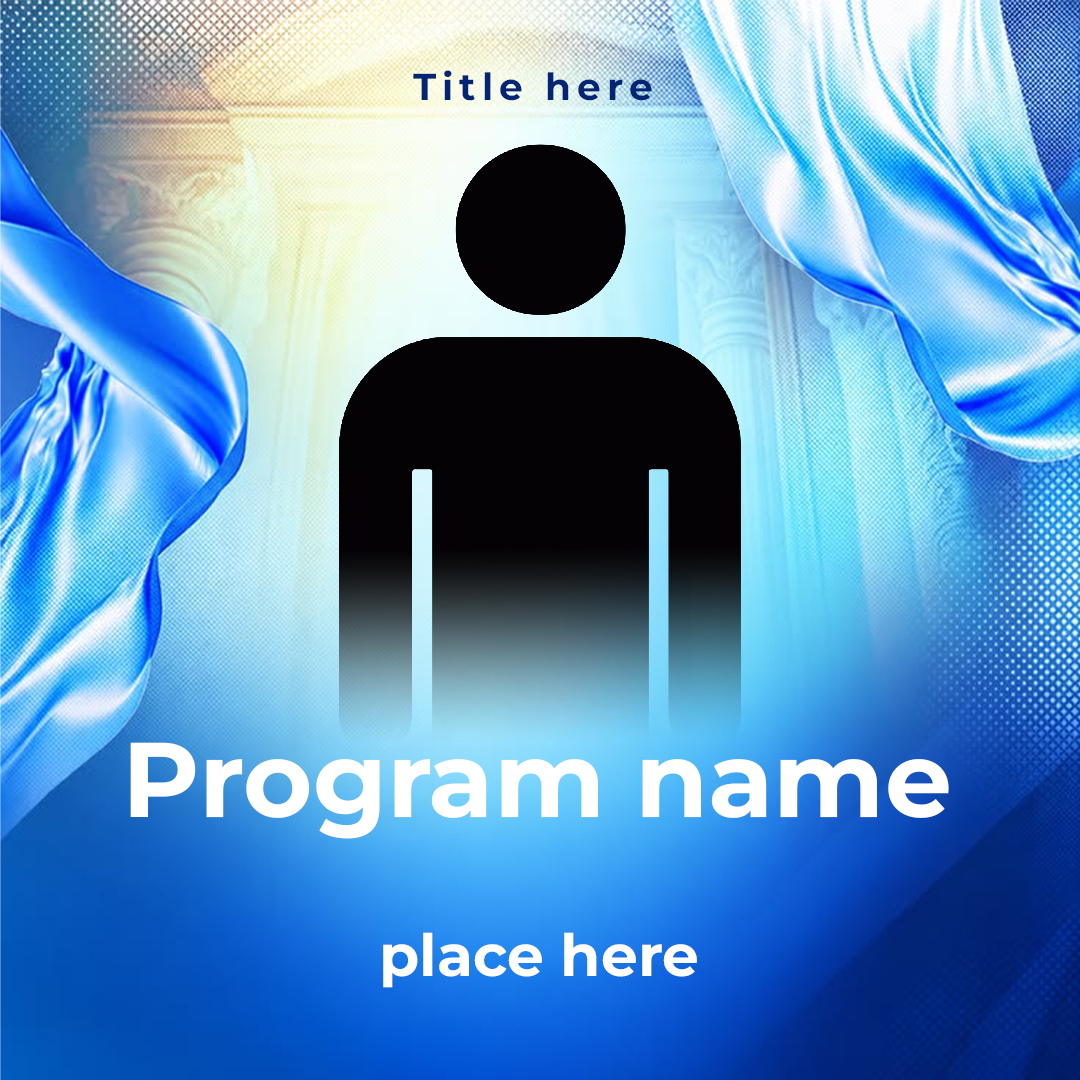
<style>
.page{position:relative;width:1080px;height:1080px}
.page>*{position:absolute;margin:0}
.t1{font:37.5px "Montserrat-Bold";letter-spacing:0.16em;color:#042576}
.t2{font:105.9px "Montserrat-Bold";color:#ffffff}
.t3{font:58.3px "Montserrat-Bold";color:#ffffff}
</style>
<div class="page">
<p class="t1" style="left:413px;top:70px;width:239px;height:31px">Title here</p>
<p class="t2" style="left:130px;top:742px;width:819px;height:97px">Program name</p>
<p class="t3" style="left:383px;top:932px;width:314px;height:56px">place here</p>
</div>
